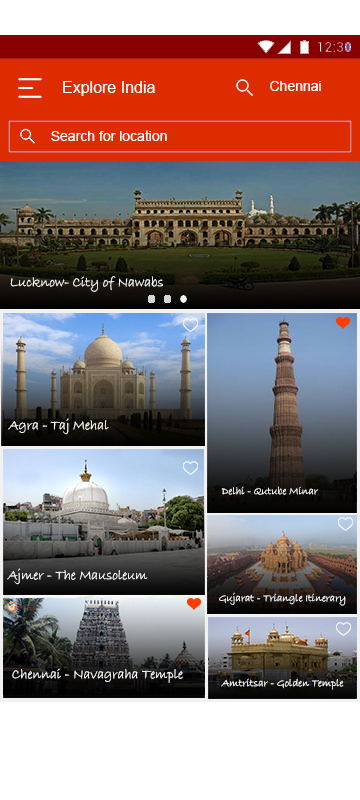
<style>
.page{position:relative;width:360px;height:800px}
.page>*{position:absolute;margin:0}
.t1{font:16px "ArialMT";color:#ffffff}
.t2{font:14px "ArialMT";color:#ffffff}
.t3{font:14px "BradleyHandITC";color:#ffffff}
.t4{font:10.8px "BradleyHandITC";color:#ffffff}
</style>
<div class="page">
<p class="t1" style="left:63px;top:81px;width:92px;height:15px">Explore India</p>
<p class="t2" style="left:270px;top:81px;width:51px;height:10px">Chennai</p>
<p class="t2" style="left:51px;top:130px;width:116px;height:11px">Search for location</p>
<p class="t3" style="left:10px;top:276px;width:154px;height:16px">Lucknow- City of Nawabs</p>
<p class="t3" style="left:8px;top:418px;width:101px;height:17px">Agra - Taj Mehal</p>
<p class="t4" style="left:221px;top:486px;width:98px;height:9px">Delhi - Qutube Minar</p>
<p class="t3" style="left:7px;top:568px;width:141px;height:17px">Ajmer - The Mausoleum</p>
<p class="t4" style="left:219px;top:592px;width:127px;height:14px">Gujarat - Triangle Itinerary</p>
<p class="t3" style="left:12px;top:668px;width:171px;height:15px">Chennai - Navagraha Temple</p>
<p class="t4" style="left:221px;top:678px;width:123px;height:12px">Amtritsar - Golden Temple</p>
</div>
